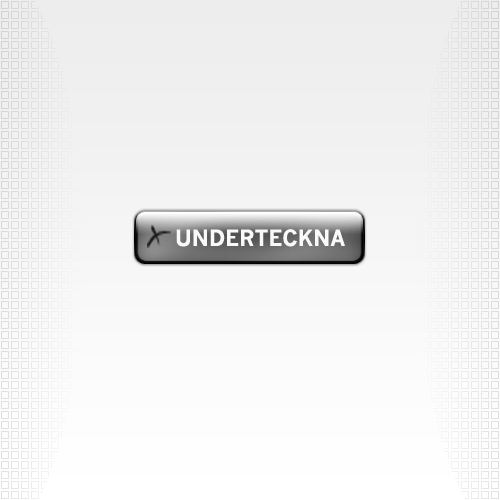
<style>
.page{position:relative;width:500px;height:500px}
.page>*{position:absolute;margin:0}
.t1{font:22px "NewsGothicMT-Bold";color:#faf9f9}
</style>
<div class="page">
<p class="t1" style="left:176px;top:229px;width:169px;height:18px">UNDERTECKNA</p>
</div>
